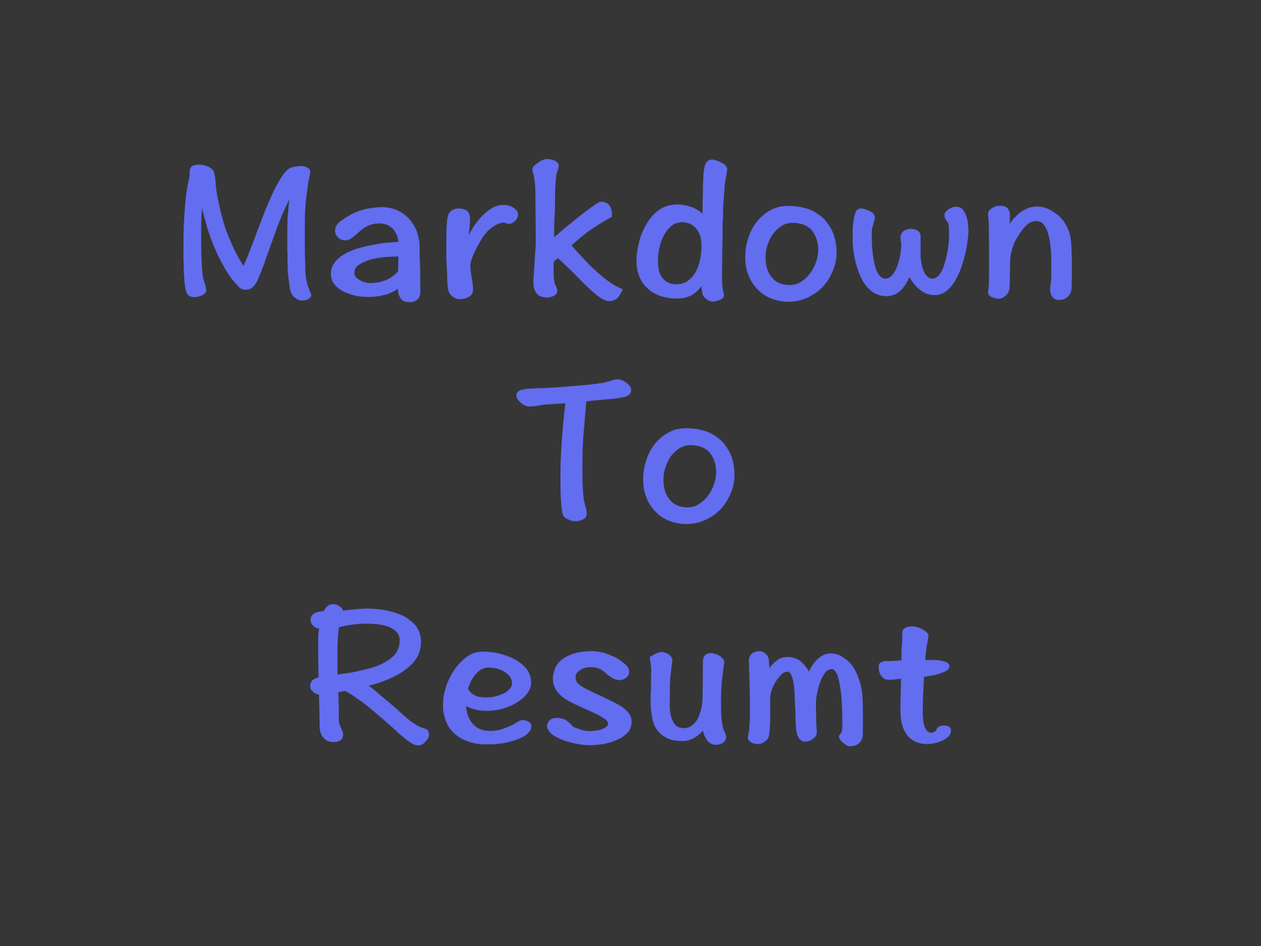
<style>
.page{position:relative;width:1261px;height:946px;background:#363636}
.page>*{position:absolute;margin:0}
.t1{font:200.2px/222.4px "HannotateSC-W7";color:#636def}
</style>
<div class="page">
<p class="t1" style="left:183px;top:159px;width:889px;height:587px;text-align:center">Markdown<br>To<br>Resumt</p>
</div>
